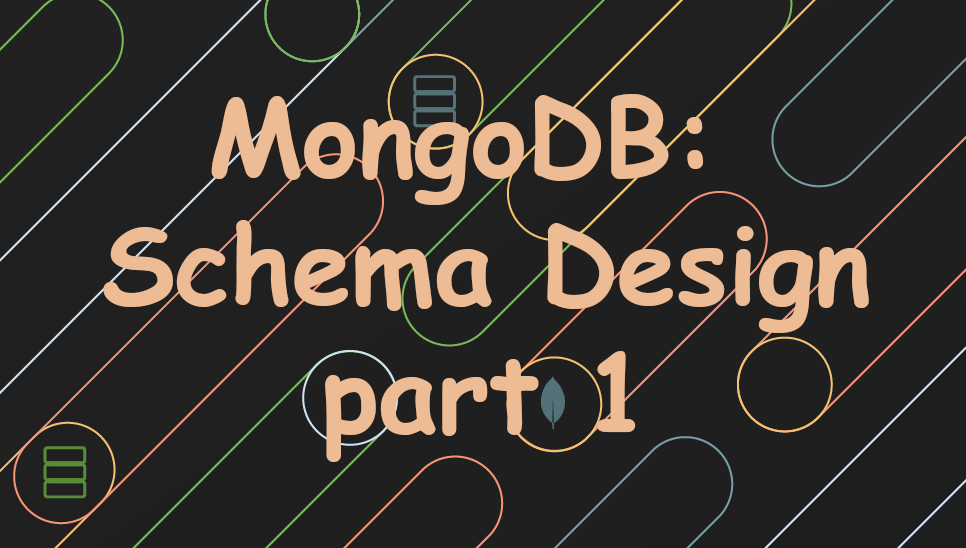
<style>
.page{position:relative;width:966px;height:548px;background:#1f1f1f}
.page>*{position:absolute;margin:0}
.t1{font:106.7px "ComicSansMS-Bold";color:#edbc95}
</style>
<div class="page">
<p class="t1" style="left:103px;top:94px;width:766px;height:368px;text-align:center">MongoDB: <br>Schema Design<br>part 1</p>
</div>
